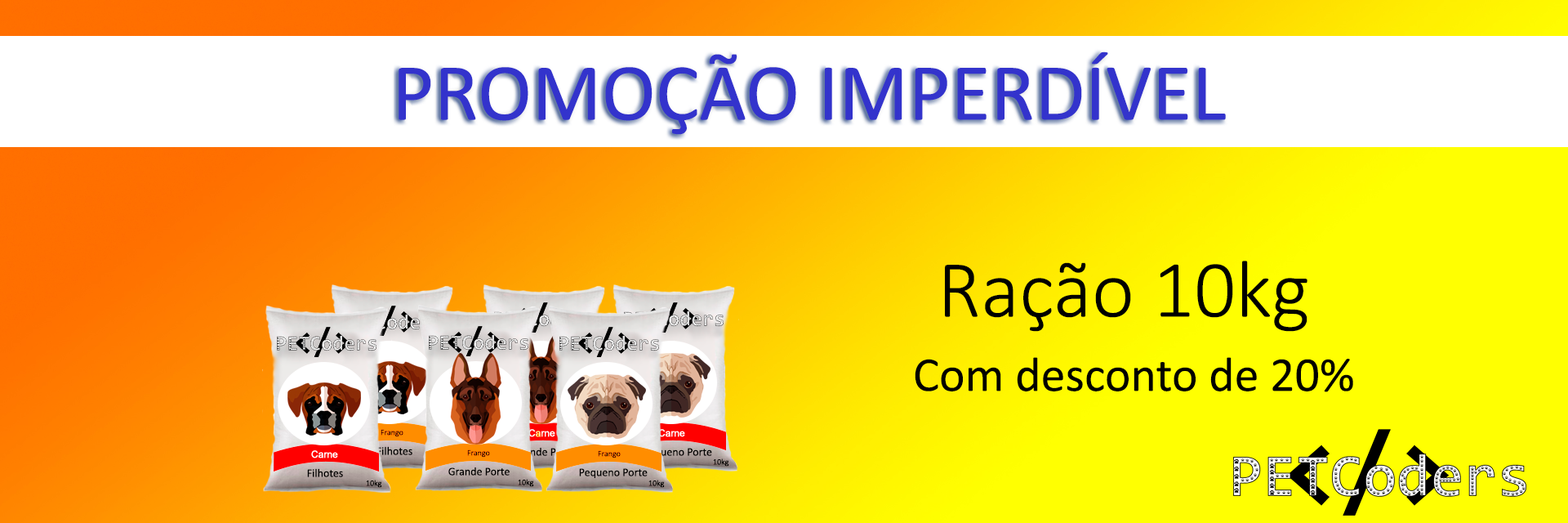
<style>
.page{position:relative;width:1568px;height:523px}
.page>*{position:absolute;margin:0}
.t1{font:81.7px "Calibri";color:#3333cc}
.t2{font:81.7px "Calibri-Light";color:#000000}
.t3{font:49px "Calibri";color:#000000}
</style>
<div class="page">
<p class="t1" style="left:399px;top:51px;width:827px;height:84px">PROMOÇÃO IMPERDÍVEL</p>
<p class="t2" style="left:945px;top:261px;width:362px;height:71px">Ração 10kg</p>
<p class="t3" style="left:915px;top:357px;width:438px;height:35px">Com desconto de 20%</p>
</div>
